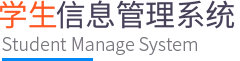
<style>
.page{position:relative;width:240px;height:61px;background:#ffffff}
.page>*{position:absolute;margin:0}
.t1{font:30px "SourceHanSansCN-Regular";color:#ff5722}
.t2{font:30px "SourceHanSansCN-Regular";color:#474059}
.t3{font:18px "SourceHanSansCN-Light";color:#7c7981}
</style>
<div class="page">
<p class="t1" style="left:0px;top:0px;width:57px;height:29px">学生</p>
<p class="t2" style="left:56px;top:0px;width:179px;height:29px">信息管理系统</p>
<p class="t3" style="left:2px;top:36px;width:195px;height:19px">Student Manage System</p>
</div>
